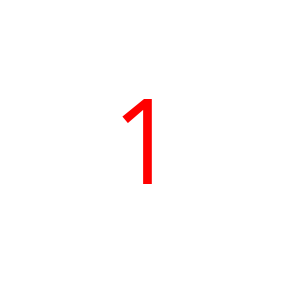
<style>
.page{position:relative;width:283px;height:283px;background:#ffffff}
.page>*{position:absolute;margin:0}
.t1{font:120px "Avenir-Book";color:#ff0000}
</style>
<div class="page">
<p class="t1" style="left:122px;top:99px;width:30px;height:85px">1</p>
</div>
